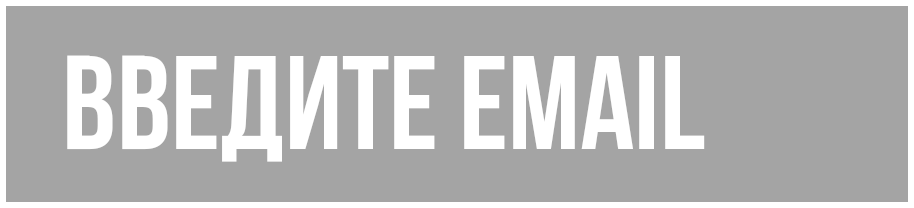
<style>
.page{position:relative;width:914px;height:208px;background:#a4a4a4}
.page>*{position:absolute;margin:0}
.t1{font:133.3px "BebasNeueBold";color:#ffffff}
.t2{font:125px "BebasNeueBold";color:#ffffff}
</style>
<div class="page">
<p class="t1" style="left:67px;top:55px;width:638px;height:107px"><span class="t2"> </span>введите email</p>
</div>
